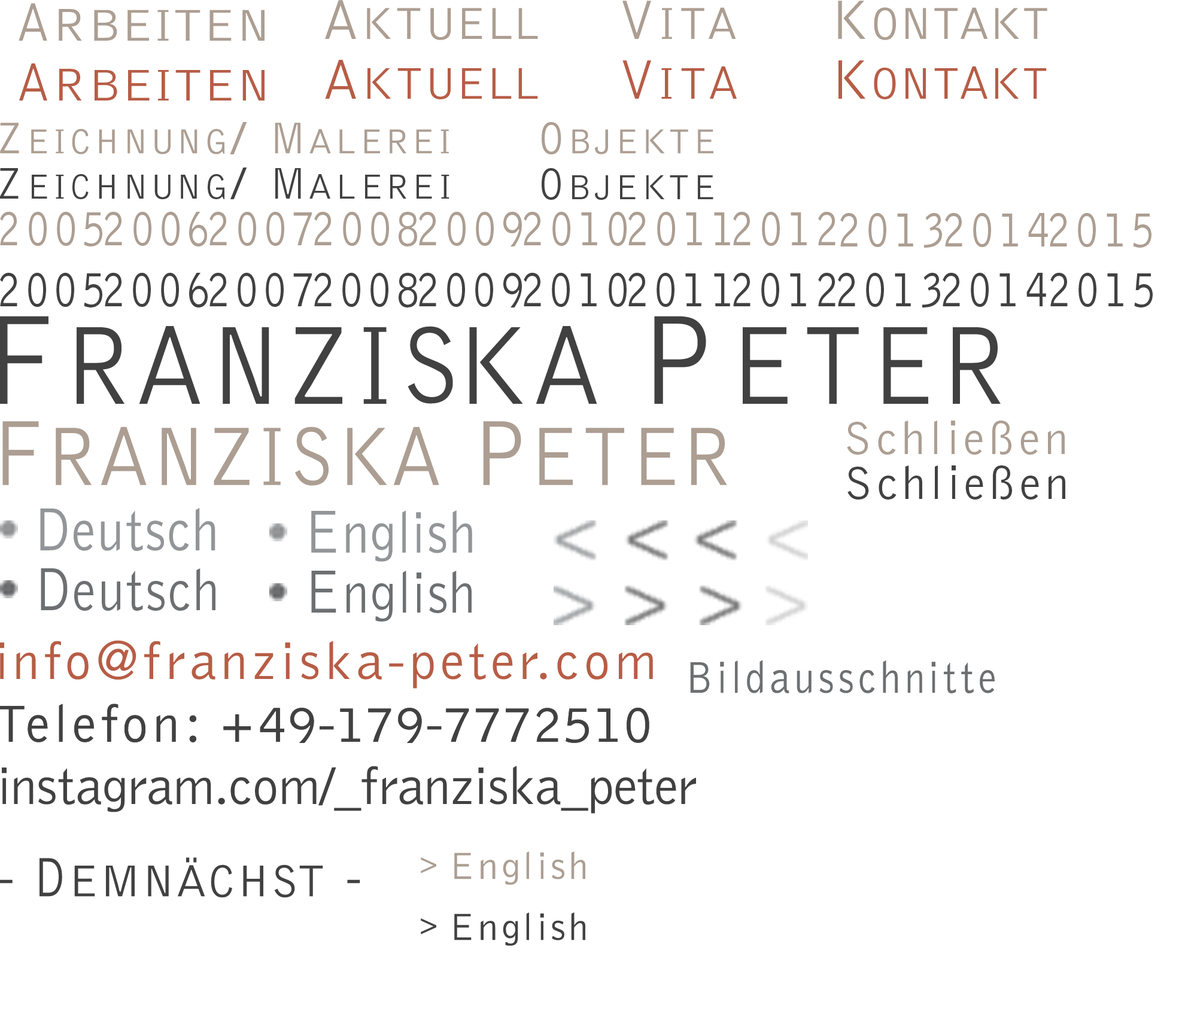
<style>
.page{position:relative;width:1179px;height:1011px;background:#ffffff}
.page>*{position:absolute;margin:0}
.t1{font:65.8px "BellGothicStd-Light";color:#ac9e92;font-variant:small-caps;scale:1.07 1}
.t2{font:55.3px "BellGothicStd-Light";letter-spacing:0.06em;color:#ac9e92;font-variant:small-caps;scale:0.87 1}
.t3{font:67.8px "BellGothicStd-Light";letter-spacing:0.06em;color:#ac9e92;font-variant:small-caps;scale:1.04 1}
.t4{font:65.8px "BellGothicStd-Light";color:#ac9e92;font-variant:small-caps}
.t5{font:57.3px "BellGothicStd-Light";letter-spacing:0.06em;color:#ac9e92;font-variant:small-caps;scale:0.92 1}
.t6{font:65.8px "BellGothicStd-Light";letter-spacing:0.06em;color:#ac9e92;font-variant:small-caps}
.t7{font:65.8px "BellGothicStd-Light";letter-spacing:0.025em;color:#ac9e92;font-variant:small-caps}
.t8{font:57.3px "BellGothicStd-Light";letter-spacing:0.07em;color:#ac9e92;font-variant:small-caps;scale:0.92 1}
.t9{font:65.8px "BellGothicStd-Light";letter-spacing:0.03em;color:#ac9e92;font-variant:small-caps}
.t10{font:57.3px "BellGothicStd-Light";letter-spacing:0.08em;color:#ac9e92;font-variant:small-caps;scale:0.92 1}
.t11{font:65.8px "BellGothicStd-Light";color:#b75d46;font-variant:small-caps;scale:1.07 1}
.t12{font:55.3px "BellGothicStd-Light";letter-spacing:0.06em;color:#b75d46;font-variant:small-caps;scale:0.87 1}
.t13{font:67.8px "BellGothicStd-Light";letter-spacing:0.06em;color:#b75d46;font-variant:small-caps;scale:1.04 1}
.t14{font:65.8px "BellGothicStd-Light";color:#b75d46;font-variant:small-caps}
.t15{font:57.3px "BellGothicStd-Light";letter-spacing:0.06em;color:#b75d46;font-variant:small-caps;scale:0.92 1}
.t16{font:65.8px "BellGothicStd-Light";letter-spacing:0.06em;color:#b75d46;font-variant:small-caps}
.t17{font:65.8px "BellGothicStd-Light";letter-spacing:0.025em;color:#b75d46;font-variant:small-caps}
.t18{font:57.3px "BellGothicStd-Light";letter-spacing:0.07em;color:#b75d46;font-variant:small-caps;scale:0.92 1}
.t19{font:65.8px "BellGothicStd-Light";letter-spacing:0.02em;color:#b75d46;font-variant:small-caps}
.t20{font:68.5px "BellGothicStd-Light";letter-spacing:0.025em;color:#b75d46;font-variant:small-caps;scale:0.96 1}
.t21{font:57.3px "BellGothicStd-Light";letter-spacing:0.08em;color:#b75d46;font-variant:small-caps;scale:0.92 1}
.t22{font:65.8px "BellGothicStd-Light";letter-spacing:0.03em;color:#b75d46;font-variant:small-caps}
.t23{font:65.8px "BellGothicStd-Light";letter-spacing:-0.03em;color:#b75d46;font-variant:small-caps}
.t24{font:68.5px "BellGothicStd-Light";color:#b75d46;font-variant:small-caps;scale:0.96 1}
.t25{font:65.8px "BellGothicStd-Light";letter-spacing:0.03em;color:#b75d46;font-variant:small-caps;scale:0.97 1}
.t26{font:50.9px "BellGothicStd-Light";letter-spacing:0.08em;color:#ac9e92;font-variant:small-caps}
.t27{font:45.8px "BellGothicStd-Light";letter-spacing:0.1em;color:#ac9e92;font-variant:small-caps;scale:0.89 1}
.t28{font:45.8px "BellGothicStd-Light";letter-spacing:0.1em;color:#ac9e92;font-variant:small-caps;scale:1.11 1}
.t29{font:45.8px "BellGothicStd-Light";letter-spacing:0.06em;color:#ac9e92;font-variant:small-caps;scale:0.89 1}
.t30{font:50.9px "BellGothicStd-Light";letter-spacing:0.08em;color:#414142;font-variant:small-caps}
.t31{font:45.8px "BellGothicStd-Light";letter-spacing:0.1em;color:#414142;font-variant:small-caps;scale:0.89 1}
.t32{font:45.8px "BellGothicStd-Light";letter-spacing:0.1em;color:#414142;font-variant:small-caps;scale:1.11 1}
.t33{font:45.8px "BellGothicStd-Light";letter-spacing:0.06em;color:#414142;font-variant:small-caps;scale:0.89 1}
.t34{font:53.9px "BellGothicStd-Light";letter-spacing:0.1em;color:#ac9e92;font-variant:small-caps;scale:0.8 1}
.t35{font:53.9px "BellGothicStd-Light";letter-spacing:0.1em;color:#ac9e92;font-variant:small-caps;scale:0.77 1}
.t36{font:53.9px "BellGothicStd-Light";letter-spacing:0.1em;color:#414142;font-variant:small-caps;scale:0.8 1}
.t37{font:164.6px "BellGothicStd-Light";letter-spacing:0.04em;color:#414142;font-variant:small-caps;scale:0.9 1}
.t38{font:131.7px "BellGothicStd-Light";letter-spacing:0.04em;color:#414142;font-variant:small-caps;scale:0.9 1}
.t39{font:156.3px "BellGothicStd-Light";letter-spacing:-0.06em;color:#414142;font-variant:small-caps;scale:0.95 1}
.t40{font:164.6px "BellGothicStd-Light";letter-spacing:0.06em;color:#414142;font-variant:small-caps;scale:0.9 1}
.t41{font:131.7px "BellGothicStd-Light";letter-spacing:0.1em;color:#414142;font-variant:small-caps;scale:0.9 1}
.t42{font:122.7px "BellGothicStd-Light";letter-spacing:0.02em;color:#ac9e92;font-variant:small-caps;scale:0.9 1}
.t43{font:95.8px "BellGothicStd-Light";color:#ac9e92;font-variant:small-caps;scale:0.9 1}
.t44{font:119px "BellGothicStd-Light";letter-spacing:0.02em;color:#ac9e92;font-variant:small-caps;scale:0.93 1}
.t45{font:47.9px "BellGothicStd-Light";letter-spacing:0.08em;color:#ac9e92}
.t46{font:49.8px "BellGothicStd-Light";letter-spacing:0.08em;color:#ac9e92;scale:0.96 1}
.t47{font:47.9px "BellGothicStd-Light";letter-spacing:0.08em;color:#414142}
.t48{font:49.8px "BellGothicStd-Light";letter-spacing:0.08em;color:#414142;scale:0.96 1}
.t49{font:59.8px "BellGothicStd-Light";letter-spacing:0.02em;color:#939598;scale:0.9 1}
.t50{font:62.8px "BellGothicStd-Light";letter-spacing:0.02em;color:#939598;scale:0.9 1}
.t51{font:59.8px "BellGothicStd-Light";letter-spacing:0.02em;color:#6d6f71;scale:0.9 1}
.t52{font:62.8px "BellGothicStd-Light";letter-spacing:0.02em;color:#6d6f71;scale:0.9 1}
.t53{font:53.9px "BellGothicStd-Light";letter-spacing:0.08em;color:#b75d46}
.t54{font:45.8px "BellGothicStd-Light";letter-spacing:0.1em;color:#6d6f71;scale:0.89 1}
.t55{font:53.9px "BellGothicStd-Light";letter-spacing:-0.01em;color:#414142}
.t56{font:65.8px "BellGothicStd-Light";letter-spacing:0.02em;color:#414142;font-variant:small-caps}
.t57{font:57.3px "BellGothicStd-Light";letter-spacing:0.06em;color:#414142;font-variant:small-caps;scale:0.84 1}
.t58{font:38.9px "BellGothicStd-Light";letter-spacing:0.08em;color:#ac9e92}
.t59{font:29.9px "BellGothicStd-Light";letter-spacing:0.08em;color:#ac9e92}
.t60{font:38.9px "BellGothicStd-Light";letter-spacing:0.08em;color:#ac9e92;scale:1.04 1}
.t61{font:38.9px "BellGothicStd-Light";letter-spacing:0.06em;color:#ac9e92}
.t62{font:38.9px "BellGothicStd-Light";letter-spacing:0.12em;color:#ac9e92}
.t63{font:38.9px "BellGothicStd-Light";letter-spacing:0.08em;color:#414142}
.t64{font:29.9px "BellGothicStd-Light";letter-spacing:0.08em;color:#414142}
.t65{font:38.9px "BellGothicStd-Light";letter-spacing:0.08em;color:#414142;scale:1.04 1}
.t66{font:38.9px "BellGothicStd-Light";letter-spacing:0.06em;color:#414142}
.t67{font:38.9px "BellGothicStd-Light";letter-spacing:0.12em;color:#414142}
</style>
<div class="page">
<p class="t1" style="left:19px;top:3px;width:246px;height:38px"><span class="t2">A</span><span class="t3">r</span>beiten</p>
<p class="t4" style="left:325px;top:0px;width:213px;height:40px"><span class="t5">A</span><span class="t6">k</span><span class="t7">t</span>uell</p>
<p class="t6" style="left:622px;top:1px;width:114px;height:38px"><span class="t8">V</span>it<span class="t7">a</span></p>
<p class="t9" style="left:838px;top:1px;width:209px;height:39px"><span class="t10">K</span><span class="t4">o</span>nt<span class="t4">a</span>kt</p>
<p class="t11" style="left:19px;top:63px;width:246px;height:38px"><span class="t12">A</span><span class="t13">r</span>beiten</p>
<p class="t14" style="left:325px;top:60px;width:213px;height:39px"><span class="t15">A</span><span class="t16">k</span><span class="t17">t</span>uell</p>
<p class="t18" style="left:622px;top:60px;width:115px;height:39px">V<span class="t16">i</span><span class="t19">t</span><span class="t20">a</span></p>
<p class="t21" style="left:838px;top:60px;width:209px;height:39px">K<span class="t14">o</span><span class="t22">n</span><span class="t23">t</span><span class="t24">a</span><span class="t22">k</span><span class="t25">t</span></p>
<p class="t26" style="left:0px;top:122px;width:449px;height:32px"><span class="t27">Z</span>eichnung<span class="t28">/ </span><span class="t29">M</span>alerei</p>
<p class="t26" style="left:542px;top:122px;width:171px;height:32px"><span class="t27">O</span>bjekte</p>
<p class="t30" style="left:0px;top:168px;width:449px;height:31px"><span class="t31">Z</span>eichnung<span class="t32">/ </span><span class="t33">M</span>alerei</p>
<p class="t30" style="left:542px;top:168px;width:171px;height:32px"><span class="t31">O</span>bjekte</p>
<p class="t34" style="left:0px;top:212px;width:102px;height:35px">2005</p>
<p class="t34" style="left:105px;top:212px;width:102px;height:35px">200<span class="t35">6</span></p>
<p class="t34" style="left:209px;top:212px;width:103px;height:34px">2007</p>
<p class="t34" style="left:314px;top:212px;width:103px;height:35px">2008</p>
<p class="t34" style="left:419px;top:212px;width:103px;height:35px">2009</p>
<p class="t34" style="left:524px;top:212px;width:103px;height:34px">2010</p>
<p class="t34" style="left:628px;top:212px;width:102px;height:34px">2011</p>
<p class="t34" style="left:733px;top:212px;width:102px;height:34px">2012</p>
<p class="t34" style="left:840px;top:213px;width:102px;height:35px">2013</p>
<p class="t34" style="left:945px;top:213px;width:103px;height:34px">2014</p>
<p class="t34" style="left:1050px;top:213px;width:101px;height:35px">2015</p>
<p class="t36" style="left:0px;top:273px;width:102px;height:35px">2005</p>
<p class="t36" style="left:105px;top:273px;width:103px;height:35px">2006</p>
<p class="t36" style="left:209px;top:273px;width:103px;height:34px">2007</p>
<p class="t36" style="left:314px;top:273px;width:103px;height:35px">2008</p>
<p class="t36" style="left:419px;top:273px;width:103px;height:35px">2009</p>
<p class="t36" style="left:524px;top:273px;width:103px;height:34px">2010</p>
<p class="t36" style="left:628px;top:273px;width:102px;height:34px">2011</p>
<p class="t36" style="left:733px;top:273px;width:102px;height:34px">2012</p>
<p class="t36" style="left:838px;top:273px;width:102px;height:35px">2013</p>
<p class="t36" style="left:943px;top:273px;width:103px;height:34px">2014</p>
<p class="t36" style="left:1050px;top:273px;width:103px;height:35px">2015</p>
<p class="t37" style="left:0px;top:316px;width:1001px;height:88px"><span class="t38">F</span>ranzi<span class="t39">s</span><span class="t40">k</span>a <span class="t41">P</span>eter</p>
<p class="t42" style="left:2px;top:421px;width:725px;height:65px"><span class="t43">F</span>ranzi<span class="t44">s</span>ka <span class="t43">P</span>eter</p>
<p class="t45" style="left:847px;top:421px;width:218px;height:34px">Schl<span class="t46">i</span>eßen</p>
<p class="t47" style="left:847px;top:466px;width:218px;height:34px">Schl<span class="t48">i</span>eßen</p>
<p class="t49" style="left:40px;top:508px;width:175px;height:43px"><span class="t50">D</span>eutsch</p>
<p class="t49" style="left:311px;top:510px;width:161px;height:52px"><span class="t50">E</span>nglish</p>
<p class="t51" style="left:41px;top:569px;width:174px;height:43px"><span class="t52">D</span>eutsch</p>
<p class="t51" style="left:311px;top:571px;width:161px;height:51px"><span class="t52">E</span>nglish</p>
<p class="t53" style="left:0px;top:640px;width:653px;height:49px">info@franziska-peter.com</p>
<p class="t54" style="left:690px;top:660px;width:305px;height:34px">Bildausschnitte</p>
<p class="t55" style="left:2px;top:766px;width:694px;height:48px">instagram.com/_franziska_peter</p>
<p class="t56" style="left:0px;top:858px;width:360px;height:40px"><span class="t57">  - D</span>emnächst <span class="t57">-</span></p>
<p class="t58" style="left:421px;top:852px;width:164px;height:33px"><span class="t59">&gt; </span>E<span class="t60">n</span><span class="t61">g</span><span class="t62">l</span>ish</p>
<p class="t63" style="left:421px;top:913px;width:164px;height:33px"><span class="t64">&gt; </span>E<span class="t65">n</span><span class="t66">g</span><span class="t67">l</span>ish</p>
</div>
